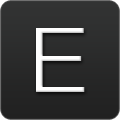
<style>
.page{position:relative;width:120px;height:120px}
.page>*{position:absolute;margin:0}
.t1{font:90px "HelveticaNeue-Light";letter-spacing:0.01em;color:#ffffff;scale:1.08 1}
</style>
<div class="page">
<p class="t1" style="left:36px;top:28px;width:49px;height:64px">E</p>
</div>
